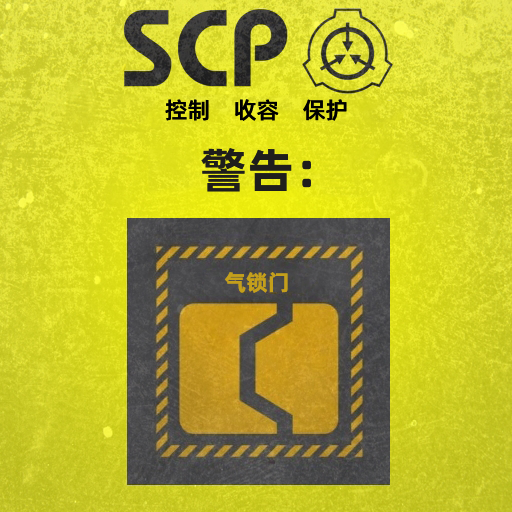
<style>
.page{position:relative;width:512px;height:512px}
.page>*{position:absolute;margin:0}
.t1{font:23px "AlibabaPuHuiTiM";color:#000000}
.t2{font:48px "AlibabaPuHuiTiB";color:#1f1e1c}
.t3{font:22px "AlibabaPuHuiTiB";color:#c49f1b}
</style>
<div class="page">
<p class="t1" style="left:165px;top:99px;width:182px;height:22px">控制    收容    保护</p>
<p class="t2" style="left:201px;top:148px;width:110px;height:44px">警告：</p>
<p class="t3" style="left:224px;top:272px;width:64px;height:21px">气锁门</p>
</div>
